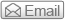
<style>
.page{position:relative;width:65px;height:20px}
.page>*{position:absolute;margin:0}
.t1{font:15px "ArialMT";letter-spacing:-0.025em;color:#777777}
</style>
<div class="page">
<p class="t1" style="left:25px;top:5px;width:35px;height:11px">Email</p>
</div>
